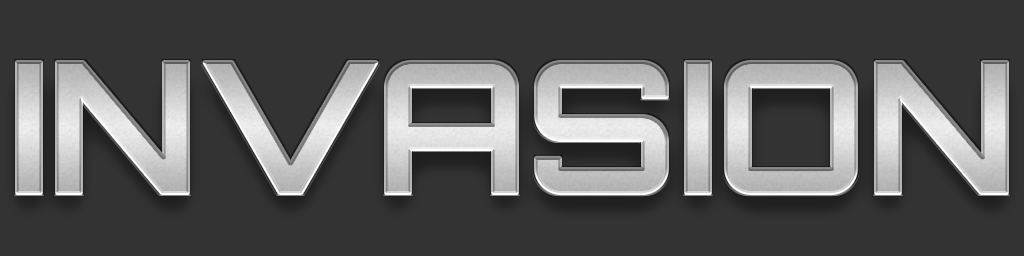
<style>
.page{position:relative;width:1024px;height:256px;background:#333333}
.page>*{position:absolute;margin:0}
.t1{font:181.1px "Orbitron-Bold";font-variant:small-caps}
</style>
<div class="page">
<p class="t1" style="left:17px;top:61px;width:990px;height:133px">INVASION</p>
</div>
